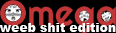
<style>
.page{position:relative;width:116px;height:33px;background:#000000}
.page>*{position:absolute;margin:0}
.t1{font:12.3px "Arial-Black";color:#ffffff}
</style>
<div class="page">
<p class="t1" style="left:0px;top:23px;width:116px;height:9px">weeb shit edition</p>
</div>
